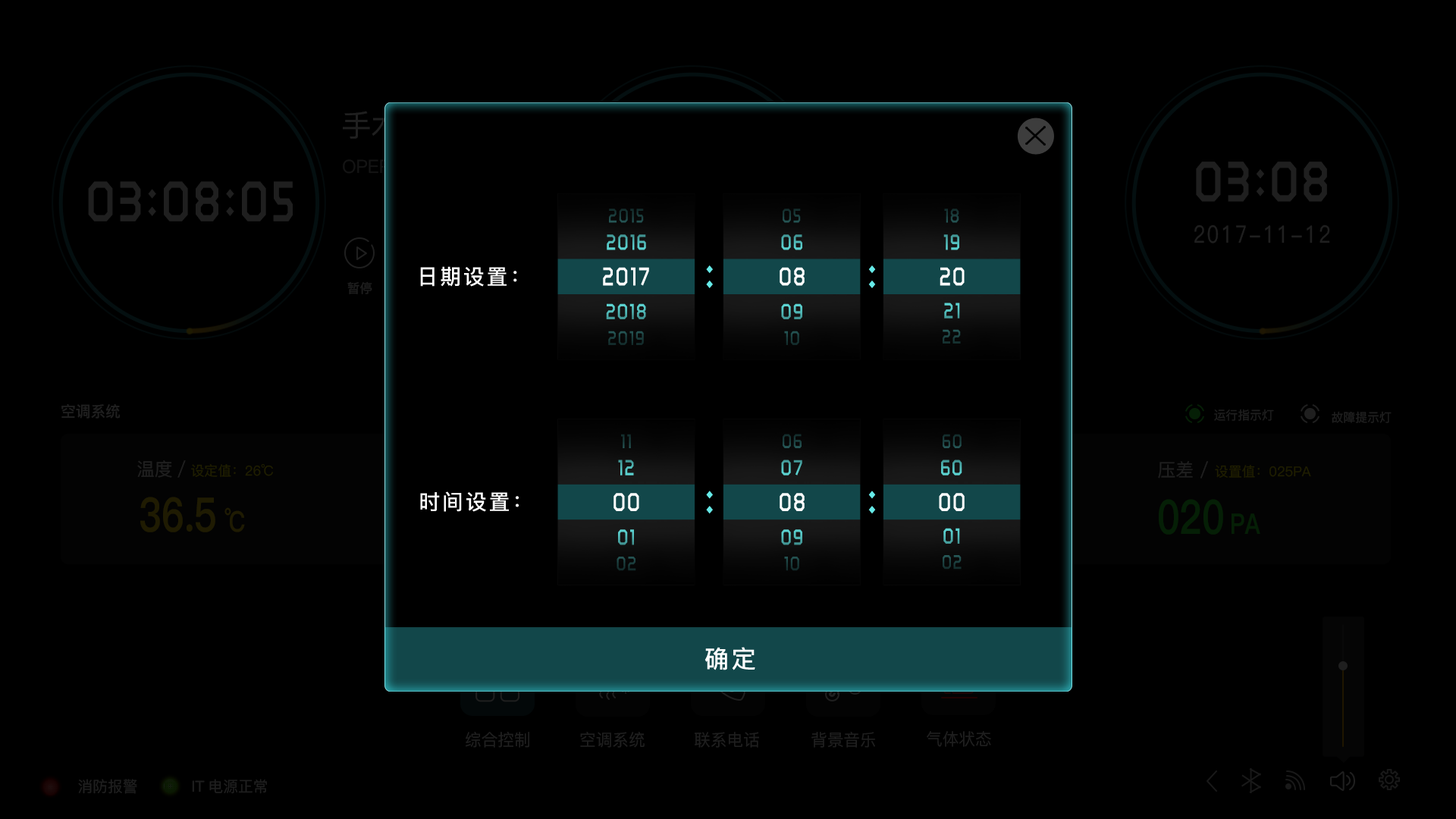
<style>
.page{position:relative;width:1456px;height:819px;background:#000000}
.page>*{position:absolute;margin:0}
.t1{font:20.3px "RTWSShangGoG0v1-Bold";letter-spacing:0.075em;color:#1a3d3c;scale:0.83 1}
.t2{font:22.4px "RTWSShangGoG0v1-Bold";letter-spacing:0.075em;scale:0.83 1}
.t3{font:21.1px "PingFang-SC-Bold";letter-spacing:0.1em;color:#ffffff}
.t4{font:26.4px "RTWSShangGoG0v1-Bold";letter-spacing:0.075em;color:#ffffff;scale:0.83 1}
.t5{font:49.7px "RTWSShangGoG0v1-Bold";letter-spacing:0.075em;color:#66eae8;scale:0.83 1}
.t6{font:20.3px "RTWSShangGoG0v1-Bold";letter-spacing:0.075em;color:#1c4141;scale:0.83 1}
.t7{font:20.3px "RTWSShangGoG0v1-Bold";letter-spacing:0.075em;color:#193a39;scale:0.83 1}
.t8{font:20.5px "RTWSShangGoG0v1-Bold";letter-spacing:0.075em;color:#1c3f3f;scale:0.83 1}
.t9{font:20.3px "RTWSShangGoG0v1-Bold";letter-spacing:0.075em;color:#1b3d3d;scale:0.83 1}
.t10{font:20.3px "RTWSShangGoG0v1-Bold";letter-spacing:0.075em;color:#1d4242;scale:0.83 1}
.t11{font:24.6px "PingFang-SC-Bold";letter-spacing:0.1em;color:#ffffff}
</style>
<div class="page">
<p class="t1" style="left:609px;top:209px;width:35px;height:14px">2015</p>
<p class="t1" style="left:783px;top:209px;width:18px;height:14px">05</p>
<p class="t1" style="left:944px;top:209px;width:15px;height:14px">18</p>
<p class="t2" style="left:607px;top:234px;width:39px;height:16px">2016</p>
<p class="t2" style="left:781px;top:234px;width:21px;height:16px">06</p>
<p class="t2" style="left:943px;top:234px;width:16px;height:16px">19</p>
<p class="t3" style="left:420px;top:266px;width:97px;height:21px">日期设置：</p>
<p class="t4" style="left:603px;top:267px;width:46px;height:19px">2017</p>
<p class="t5" style="left:706px;top:265px;width:7px;height:23px">:</p>
<p class="t4" style="left:780px;top:267px;width:25px;height:19px">08</p>
<p class="t5" style="left:868px;top:265px;width:8px;height:23px">:</p>
<p class="t4" style="left:940px;top:267px;width:25px;height:19px">20</p>
<p class="t2" style="left:606px;top:303px;width:40px;height:16px">2018</p>
<p class="t2" style="left:781px;top:303px;width:21px;height:16px">09</p>
<p class="t2" style="left:944px;top:303px;width:16px;height:15px">21</p>
<p class="t6" style="left:943px;top:329px;width:18px;height:15px">22</p>
<p class="t1" style="left:608px;top:331px;width:36px;height:14px">2019</p>
<p class="t1" style="left:784px;top:331px;width:15px;height:14px">10</p>
<p class="t7" style="left:621px;top:434px;width:10px;height:14px">11</p>
<p class="t8" style="left:783px;top:434px;width:19px;height:14px">06</p>
<p class="t9" style="left:943px;top:434px;width:19px;height:14px">60</p>
<p class="t2" style="left:618px;top:460px;width:16px;height:15px">12</p>
<p class="t2" style="left:781px;top:460px;width:21px;height:15px">07</p>
<p class="t2" style="left:941px;top:460px;width:21px;height:15px">60</p>
<p class="t3" style="left:420px;top:491px;width:99px;height:21px">时间设置：</p>
<p class="t4" style="left:613px;top:493px;width:26px;height:18px">00</p>
<p class="t5" style="left:706px;top:491px;width:7px;height:23px">:</p>
<p class="t4" style="left:780px;top:493px;width:25px;height:18px">08</p>
<p class="t5" style="left:868px;top:491px;width:8px;height:23px">:</p>
<p class="t4" style="left:939px;top:493px;width:26px;height:18px">00</p>
<p class="t2" style="left:618px;top:529px;width:16px;height:16px">01</p>
<p class="t2" style="left:781px;top:529px;width:21px;height:16px">09</p>
<p class="t2" style="left:943px;top:528px;width:17px;height:16px">01</p>
<p class="t1" style="left:617px;top:557px;width:19px;height:14px">02</p>
<p class="t9" style="left:784px;top:557px;width:15px;height:14px">10</p>
<p class="t10" style="left:943px;top:555px;width:19px;height:15px">02</p>
<p class="t11" style="left:704px;top:647px;width:51px;height:23px">确定</p>
</div>
